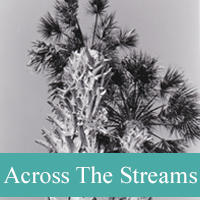
<style>
.page{position:relative;width:200px;height:200px}
.page>*{position:absolute;margin:0}
.t1{font:24px "TimesNewRomanPSMT";color:#ffffff}
</style>
<div class="page">
<p class="t1" style="left:3px;top:166px;width:194px;height:18px">Across The Streams</p>
</div>
